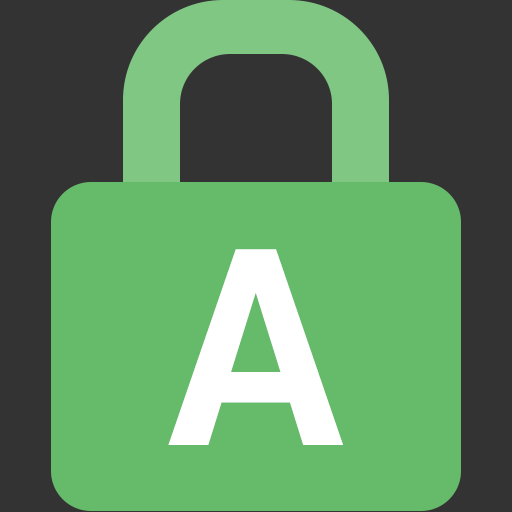
<style>
.page{position:relative;width:512px;height:512px;background:#66bb6a}
.page>*{position:absolute;margin:0}
.t1{font:275px "Roboto-Bold";letter-spacing:0.02em;color:#ffffff}
</style>
<div class="page">
<p class="t1" style="left:168px;top:249px;width:175px;height:196px">A</p>
</div>
